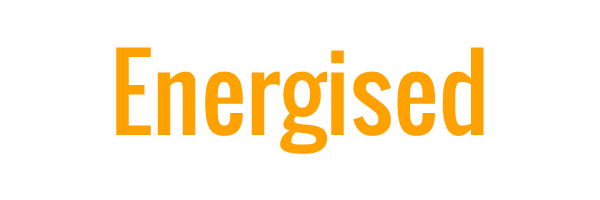
<style>
.page{position:relative;width:600px;height:200px;background:#ffffff}
.page>*{position:absolute;margin:0}
.t1{font:100px "Oswald-Regular";color:#ffa200}
</style>
<div class="page">
<p class="t1" style="left:116px;top:47px;width:368px;height:107px">Energised</p>
</div>
